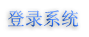
<style>
.page{position:relative;width:89px;height:37px;background:#ffffff}
.page>*{position:absolute;margin:0}
.t1{font:18px "SimSun";color:#286bee}
</style>
<div class="page">
<p class="t1" style="left:8px;top:10px;width:71px;height:17px">登录系统</p>
</div>
